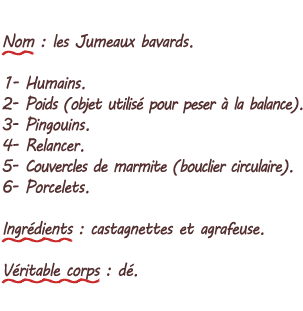
<style>
.page{position:relative;width:303px;height:311px;background:#ffffff}
.page>*{position:absolute;margin:0}
.t1{font:17.3px "MVBoli";letter-spacing:-0.05em;color:#553030;scale:0.9 1}
.t2{font:17.3px "MVBoli";letter-spacing:0.05em;color:#553030;scale:0.9 1}
.t3{font:17.3px "MVBoli";letter-spacing:-0.075em;color:#553030;scale:0.9 1}
.t4{font:17.3px "MVBoli";letter-spacing:-0.1em;color:#553030;scale:0.9 1}
</style>
<div class="page">
<p class="t1" style="left:2px;top:33px;width:301px;height:247px">Nom : les Jumeaux bavards.<br><br> <span class="t2">1</span>- Humains.<br>2- <span class="t3">Poids (objet utilisé pour peser à la balance</span><span class="t4">).<br></span>3- Pingouins.<br>4- Relancer.<br>5- <span class="t3">Couvercles de marmite (bouclier circulaire</span><span class="t4">).<br></span>6- Porcelets.<br><br>Ingrédients : castagnettes et agrafeuse.<br><br>Véritable corps : dé.</p>
</div>
